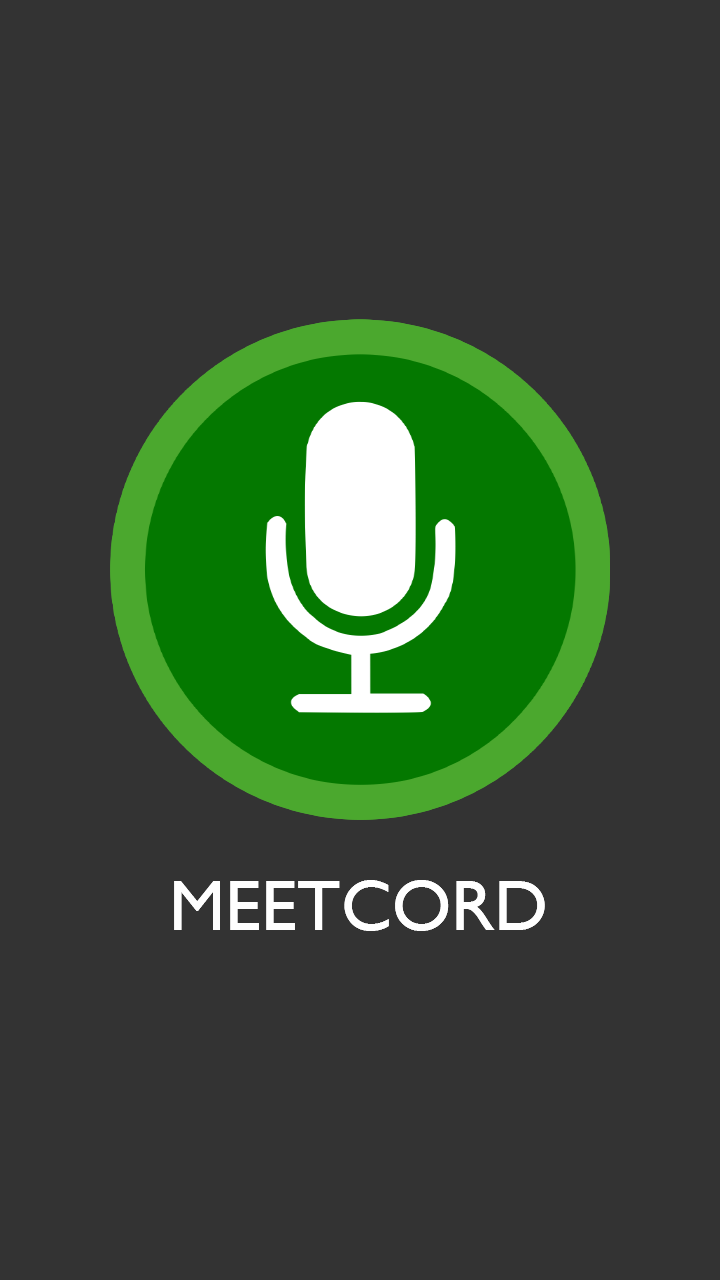
<style>
.page{position:relative;width:720px;height:1280px;background:#333333}
.page>*{position:absolute;margin:0}
.t1{font:72px "GillSansMT";color:#ffffff}
</style>
<div class="page">
<p class="t1" style="left:174px;top:880px;width:371px;height:51px">MEETCORD</p>
</div>
